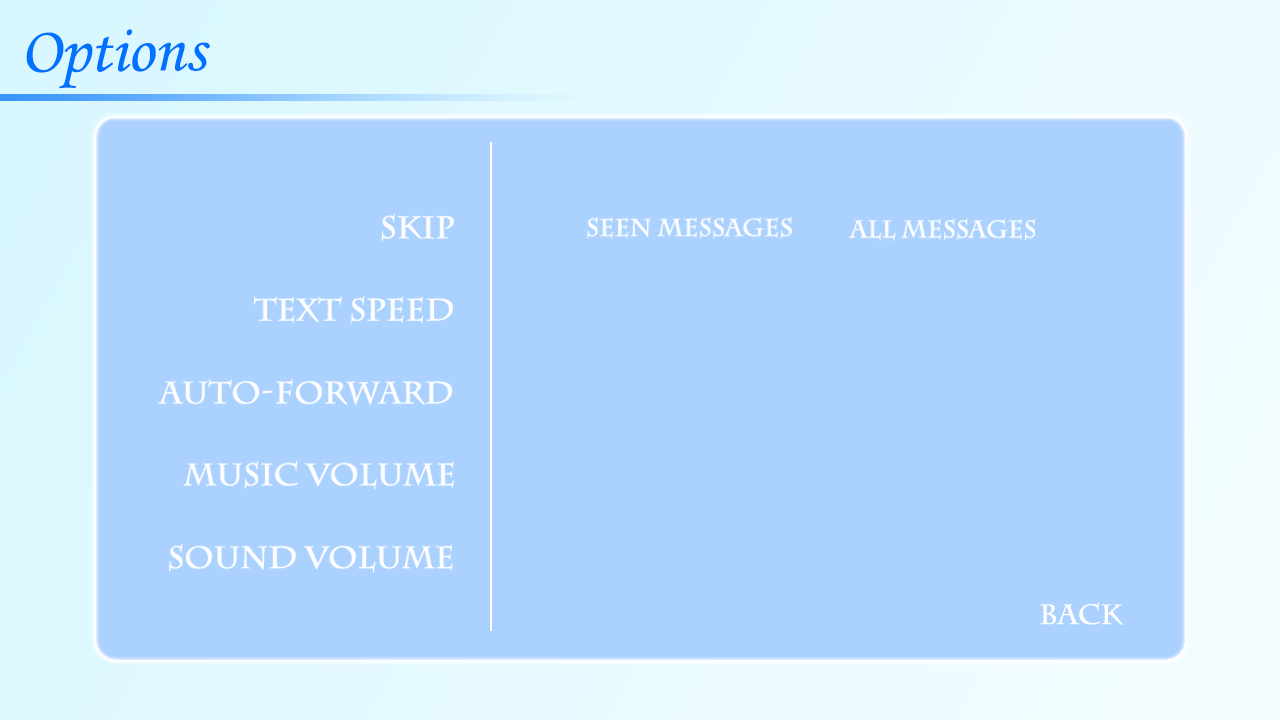
<style>
.page{position:relative;width:1280px;height:720px;background:#abd1ff}
.page>*{position:absolute;margin:0}
.t1{font:66.7px "MonotypeCorsiva";color:#0072ff}
.t2{font:30.9px "CharlemagneStd-Bold";color:#ffffff}
.t3{font:24.1px "CharlemagneStd-Bold";color:#ffffff}
.t4{font:27.8px "CharlemagneStd-Bold";color:#ffffff}
</style>
<div class="page">
<p class="t1" style="left:26px;top:29px;width:184px;height:60px;rotate:-1deg">Options</p>
<p class="t2" style="left:381px;top:213px;width:73px;height:29px">Skip</p>
<p class="t3" style="left:587px;top:217px;width:205px;height:22px">SEEN MESSAGES</p>
<p class="t3" style="left:848px;top:218px;width:187px;height:23px">ALL MESSAGES</p>
<p class="t2" style="left:254px;top:295px;width:199px;height:29px">Text Speed</p>
<p class="t2" style="left:158px;top:379px;width:295px;height:27px">Auto-Forward</p>
<p class="t2" style="left:182px;top:460px;width:272px;height:30px">Music Volume</p>
<p class="t2" style="left:169px;top:544px;width:284px;height:29px">Sound Volume</p>
<p class="t4" style="left:1040px;top:602px;width:83px;height:23px">BACK</p>
</div>
